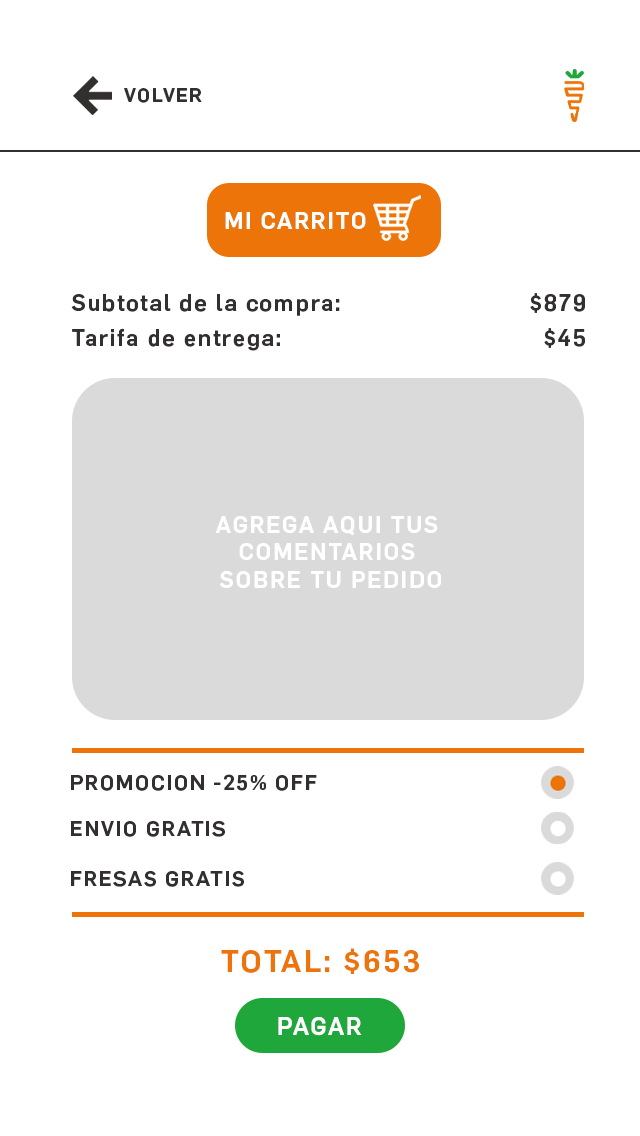
<style>
.page{position:relative;width:640px;height:1136px;background:#ffffff}
.page>*{position:absolute;margin:0}
.t1{font:19.1px "Flama-Medium";letter-spacing:0.075em;color:#332f2e}
.t2{font:22.7px "Flama-Medium";letter-spacing:0.075em;color:#332f2e}
.t3{font:23px "Flama-Medium";letter-spacing:0.075em;color:#ffffff}
.t4{font:21.1px "Flama-Medium";letter-spacing:0.075em;color:#332f2e}
.t5{font:30.4px "Flama-Medium";letter-spacing:0.075em;color:#ec7408}
</style>
<div class="page">
<p class="t1" style="left:124px;top:88px;width:78px;height:15px">VOLVER</p>
<p class="t2" style="left:71px;top:294px;width:269px;height:22px">Subtotal de la compra:</p>
<p class="t2" style="left:530px;top:293px;width:55px;height:20px">$879</p>
<p class="t2" style="left:72px;top:328px;width:208px;height:23px">Tarifa de entrega:</p>
<p class="t2" style="left:544px;top:328px;width:41px;height:20px">$45</p>
<p class="t3" style="left:215px;top:516px;width:226px;height:72px;text-align:center">AGREGA AQUI TUS <br>COMENTARIOS <br>SOBRE TU PEDIDO</p>
<p class="t4" style="left:71px;top:774px;width:246px;height:17px">PROMOCION -25% OFF</p>
<p class="t4" style="left:71px;top:821px;width:154px;height:16px">ENVIO GRATIS</p>
<p class="t4" style="left:71px;top:871px;width:173px;height:16px">FRESAS GRATIS</p>
<p class="t5" style="left:221px;top:948px;width:198px;height:26px">TOTAL: $653</p>
</div>
